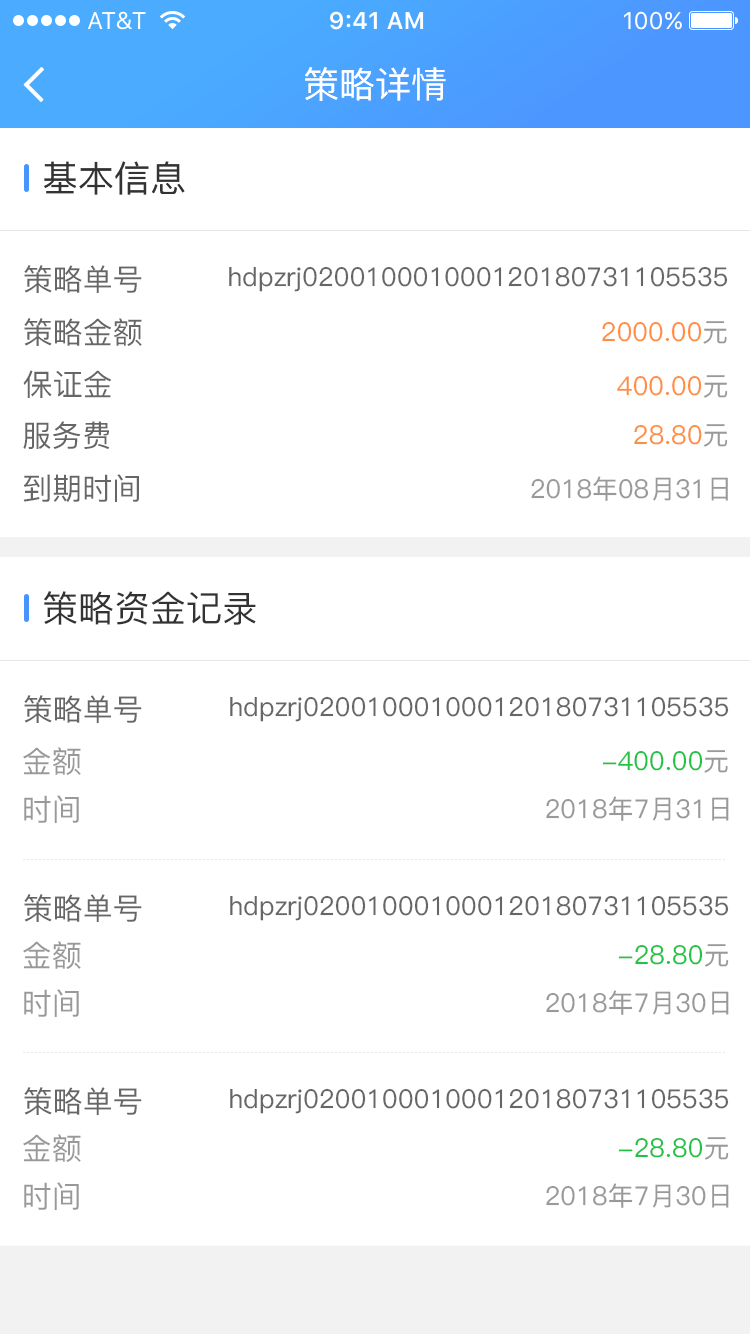
<style>
.page{position:relative;width:750px;height:1334px;background:#ffffff}
.page>*{position:absolute;margin:0}
.t1{font:36px "PingFang-SC-Medium";color:#ffffff}
.t2{font:36px "PingFang-SC-Medium";color:#333333}
.t3{font:30px "PingFang-SC-Medium";color:#666666}
.t4{font:26px "PingFang-SC-Medium";color:#666666}
.t5{font:26px "PingFang-SC-Medium";color:#ff8e42}
.t6{font:26px "PingFang-SC-Medium";color:#999999}
.t7{font:30px "PingFang-SC-Medium";color:#999999}
.t8{font:26px "PingFang-SC-Medium";color:#23c245}
</style>
<div class="page">
<p class="t1" style="left:305px;top:67px;width:141px;height:34px">策略详情</p>
<p class="t2" style="left:44px;top:161px;width:141px;height:34px">基本信息</p>
<p class="t3" style="left:24px;top:265px;width:118px;height:28px">策略单号</p>
<p class="t4" style="left:229px;top:266px;width:499px;height:26px">hdpzrj020010001000120180731105535</p>
<p class="t3" style="left:24px;top:318px;width:118px;height:28px">策略金额</p>
<p class="t5" style="left:602px;top:321px;width:125px;height:23px">2000.00<span class="t6">元</span></p>
<p class="t3" style="left:23px;top:370px;width:89px;height:28px">保证金</p>
<p class="t5" style="left:617px;top:375px;width:111px;height:23px">400.00<span class="t6">元</span></p>
<p class="t3" style="left:23px;top:421px;width:87px;height:29px">服务费</p>
<p class="t5" style="left:634px;top:424px;width:94px;height:23px">28.80<span class="t6">元</span></p>
<p class="t3" style="left:23px;top:474px;width:116px;height:28px">到期时间</p>
<p class="t6" style="left:531px;top:476px;width:197px;height:25px">2018年08月31日</p>
<p class="t2" style="left:44px;top:591px;width:212px;height:34px">策略资金记录</p>
<p class="t3" style="left:24px;top:695px;width:118px;height:28px">策略单号</p>
<p class="t4" style="left:230px;top:696px;width:499px;height:26px">hdpzrj020010001000120180731105535</p>
<p class="t7" style="left:23px;top:747px;width:58px;height:28px">金额</p>
<p class="t8" style="left:602px;top:750px;width:126px;height:23px">-400.00<span class="t6">元</span></p>
<p class="t7" style="left:24px;top:795px;width:55px;height:28px">时间</p>
<p class="t6" style="left:546px;top:796px;width:183px;height:25px">2018年7月31日</p>
<p class="t3" style="left:24px;top:894px;width:118px;height:28px">策略单号</p>
<p class="t4" style="left:230px;top:895px;width:499px;height:26px">hdpzrj020010001000120180731105535</p>
<p class="t7" style="left:23px;top:941px;width:58px;height:28px">金额</p>
<p class="t8" style="left:618px;top:944px;width:111px;height:23px">-28.80<span class="t6">元</span></p>
<p class="t7" style="left:24px;top:989px;width:55px;height:28px">时间</p>
<p class="t6" style="left:546px;top:990px;width:183px;height:25px">2018年7月30日</p>
<p class="t3" style="left:24px;top:1087px;width:118px;height:28px">策略单号</p>
<p class="t4" style="left:230px;top:1088px;width:499px;height:26px">hdpzrj020010001000120180731105535</p>
<p class="t7" style="left:23px;top:1134px;width:58px;height:28px">金额</p>
<p class="t8" style="left:618px;top:1137px;width:111px;height:23px">-28.80<span class="t6">元</span></p>
<p class="t7" style="left:24px;top:1182px;width:55px;height:28px">时间</p>
<p class="t6" style="left:546px;top:1183px;width:183px;height:25px">2018年7月30日</p>
</div>
